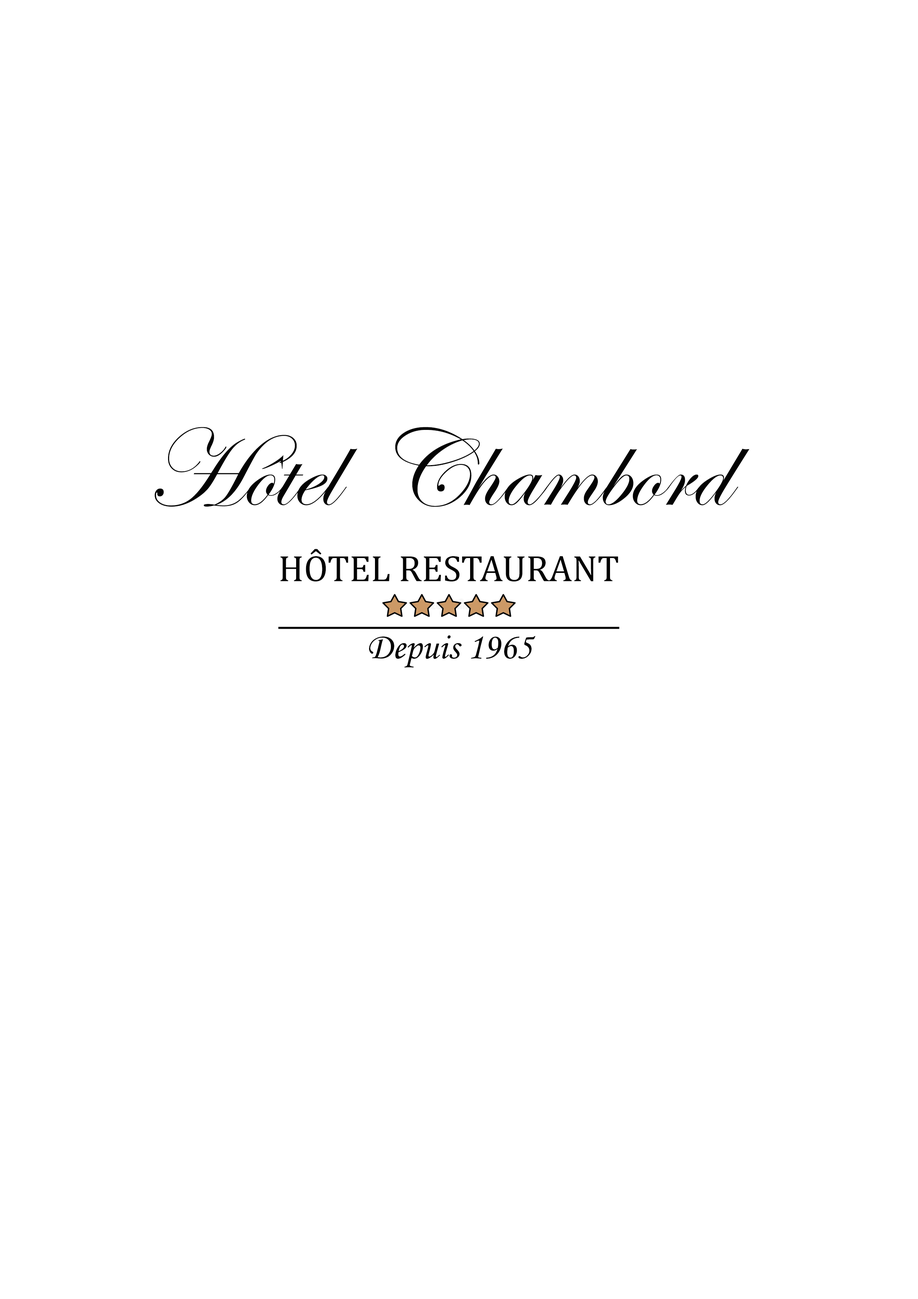
<style>
.page{position:relative;width:918px;height:1299px;background:#ffffff}
.page>*{position:absolute;margin:0}
.t1{font:37px/77.1px "CambriaMath";color:#030303;text-decoration:underline}
.t2{font:111.1px/77.1px "EdwardianScriptITC";color:#030303}
.t3{font:37px/77.1px "MonotypeCorsiva";color:#030303}
</style>
<div class="page">
<p class="t1" style="left:155px;top:427px;width:595px;height:241px"><span class="t2">Hôtel  Chambord<br>          </span>HÔTEL RESTAURANT<br><span class="t3">                 Depuis 1965</span></p>
</div>
